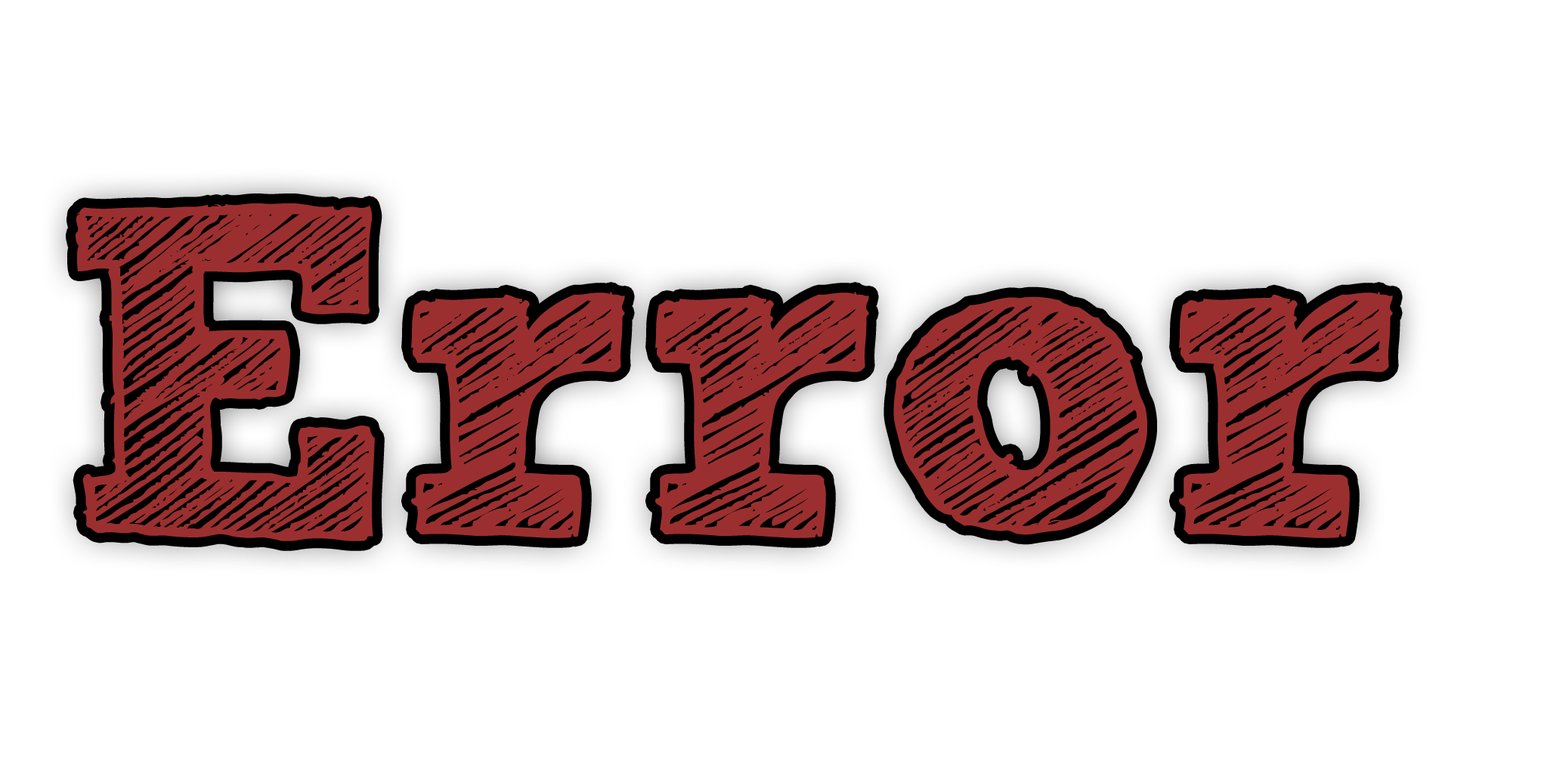
<style>
.page{position:relative;width:1541px;height:774px;background:#ffffff}
.page>*{position:absolute;margin:0}
.t1{font:472.3px "freeversionSketchBlock-Bold";color:#9b2f2f}
</style>
<div class="page">
<p class="t1" style="left:76px;top:203px;width:1317px;height:338px">Error</p>
</div>
